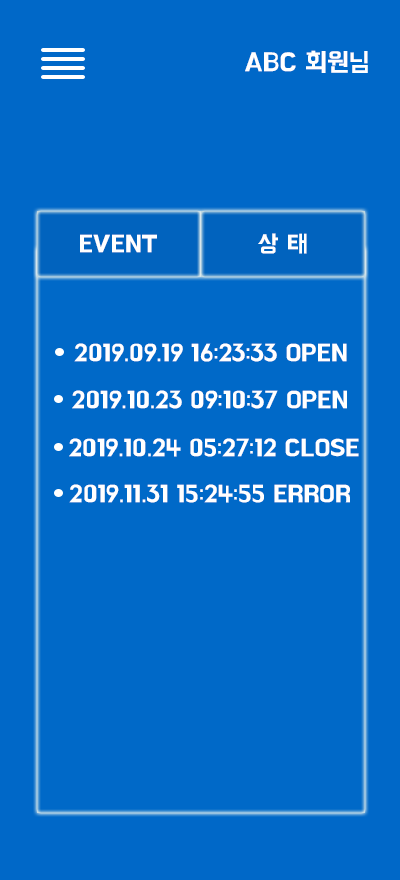
<style>
.page{position:relative;width:400px;height:880px;background:#0069c8}
.page>*{position:absolute;margin:0}
.t1{font:26px "BMHANNAPro";color:#ffffff}
.t2{font:24px "BMHANNAPro";color:#ffffff}
</style>
<div class="page">
<p class="t1" style="left:245px;top:50px;width:123px;height:23px">ABC 회원님</p>
<p class="t2" style="left:258px;top:233px;width:49px;height:21px">상 태</p>
<p class="t2" style="left:80px;top:234px;width:77px;height:19px">EVENT</p>
<p class="t2" style="left:74px;top:343px;width:273px;height:19px">2019.09.19 16:23:33 OPEN</p>
<p class="t2" style="left:72px;top:390px;width:275px;height:19px">2019.10.23 09:10:37 OPEN</p>
<p class="t2" style="left:69px;top:438px;width:290px;height:19px">2019.10.24 05:27:12 CLOSE</p>
<p class="t2" style="left:69px;top:484px;width:281px;height:19px">2019.11.31 15:24:55 ERROR</p>
</div>
